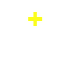
<style>
.page{position:relative;width:70px;height:70px;background:#ffffff}
.page>*{position:absolute;margin:0}
.t1{font:27.9px "Arial-BoldMT";color:#ffffff}
</style>
<div class="page">
<p class="t1" style="left:28px;top:12px;width:15px;height:14px">+</p>
</div>
